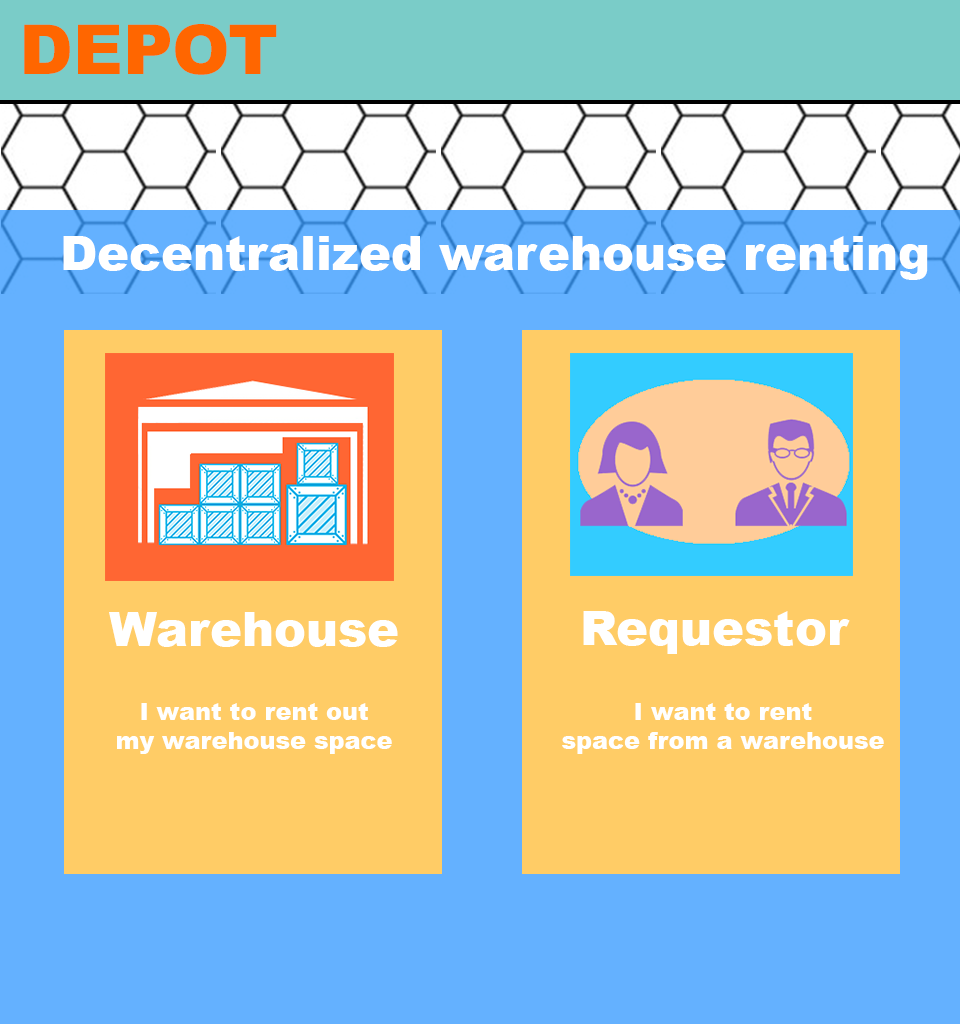
<style>
.page{position:relative;width:960px;height:1024px;background:#64b1ff}
.page>*{position:absolute;margin:0}
.t1{font:68.7px "Arial-Black";color:#ff6600}
.t2{font:48px "Arial-Black";color:#ffffff}
.t3{font:12px "Arial-Black";color:#ffffff}
</style>
<div class="page">
<p class="t1" style="left:24px;top:24px;width:253px;height:51px">DEPOT</p>
<p class="t2" style="left:63px;top:236px;width:865px;height:44px">Decentralized warehouse renting</p>
<p class="t2" style="left:109px;top:612px;width:289px;height:35px">Warehouse</p>
<p class="t2" style="left:583px;top:611px;width:267px;height:43px">Requestor</p>
<p class="t3" style="left:117px;top:703px;width:275px;height:51px;text-align:center">I want to rent out<br>my warehouse space</p>
<p class="t3" style="left:562px;top:703px;width:322px;height:51px;text-align:center">I want to rent<br>space from a warehouse</p>
</div>
